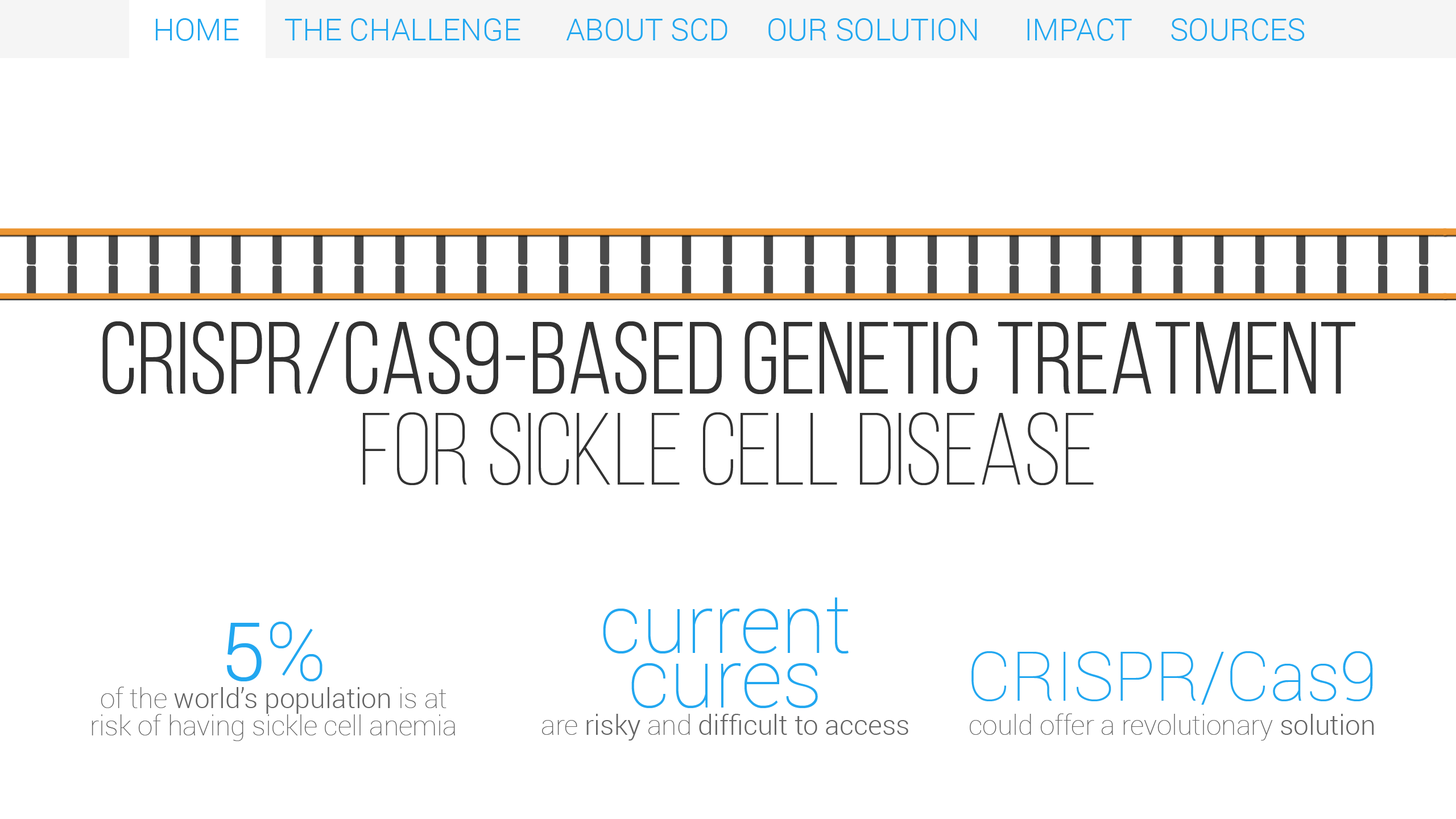
<style>
.page{position:relative;width:1456px;height:819px;background:#ffffff}
.page>*{position:absolute;margin:0}
.t1{font:30.7px "Roboto-Light";color:#22a7f0}
.t2{font:102.4px/91px "BebasNeueBook";color:#2a2a2a}
.t3{font:102.4px/91px "BebasNeueLight";color:#2a2a2a}
.t4{font:27.3px/27.3px "Roboto-Light";color:#646464}
.t5{font:81.9px/54.6px "Roboto-Thin";color:#22a7f0}
.t6{font:27.3px/27.3px "Roboto-Thin";color:#646464}
.t7{font:81.9px/27.3px "Roboto-Light";color:#22a7f0}
.t8{font:81.9px/27.3px "Roboto-Thin";color:#22a7f0}
.t9{font:27.3px/34.1px "Roboto-Thin";color:#646464}
.t10{font:68.2px/54.6px "Roboto-Thin";color:#22a7f0}
.t11{font:68.2px/34.1px "Roboto-Thin";color:#22a7f0}
.t12{font:27.3px/34.1px "Roboto-Light";color:#646464}
</style>
<div class="page">
<p class="t1" style="left:156px;top:18px;width:1149px;height:23px">HOME      THE CHALLENGE      ABOUT SCD     OUR SOLUTION      IMPACT     SOURCES</p>
<p class="t2" style="left:102px;top:321px;width:1253px;height:164px;text-align:center">CRISPR/CAS9-BASED GENETIC TREATMENT<br><span class="t3">FOR SICKLE CELL DISEASE</span></p>
<p class="t4" style="left:542px;top:597px;width:366px;height:144px;text-align:center"><span class="t5">current <br>cures<br></span><span class="t6">are </span>risky<span class="t6"> and </span>difficult to access</p>
<p class="t6" style="left:92px;top:622px;width:363px;height:119px;text-align:center"><span class="t7">5</span><span class="t8">%<br></span>of the <span class="t4">world’s population</span> is at risk of having sickle cell anemia</p>
<p class="t9" style="left:970px;top:651px;width:404px;height:90px;text-align:center"><span class="t10">CRISPR/</span><span class="t11">Cas9<br></span>could offer a revolutionary <span class="t12">solution</span></p>
</div>
